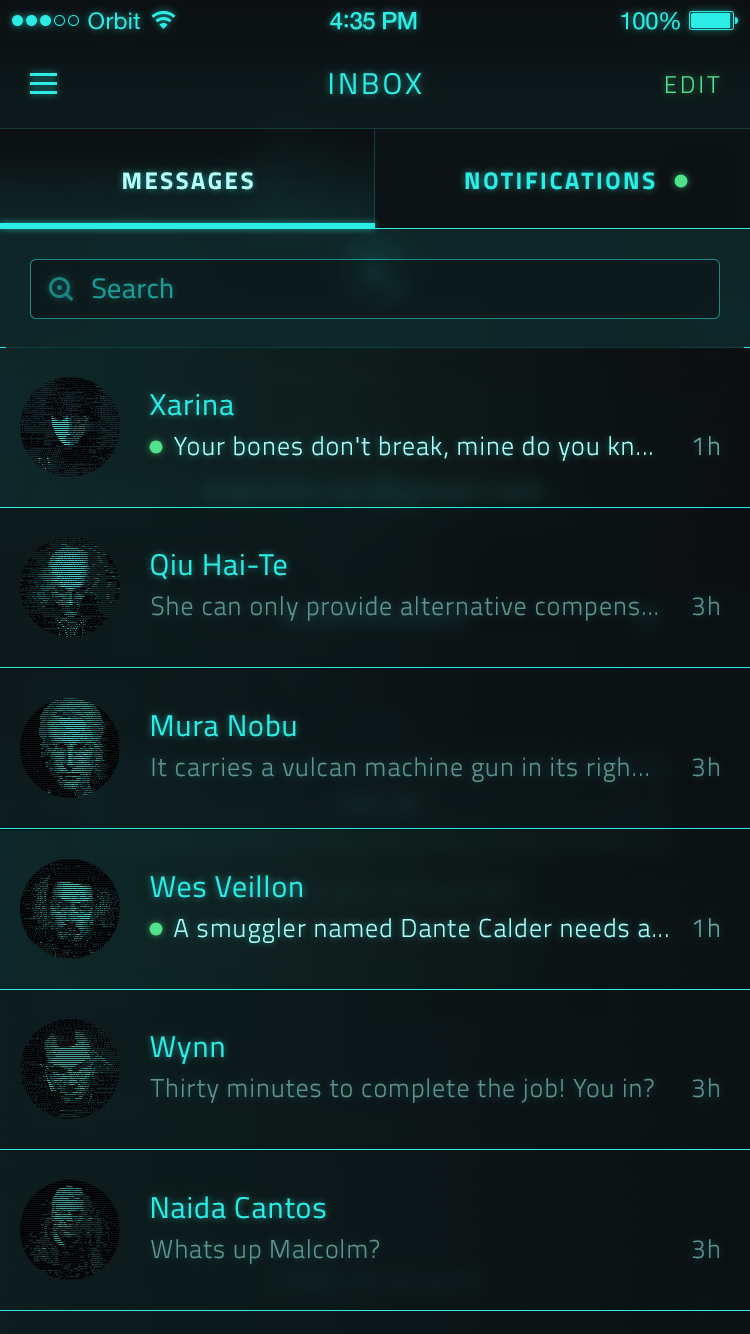
<style>
.page{position:relative;width:750px;height:1334px}
.page>*{position:absolute;margin:0}
.t1{font:23px "HelveticaNeue";letter-spacing:0.02em;color:#2bede6}
.t2{font:24px "HelveticaNeue-Medium";letter-spacing:-0.02em;color:#2bede6}
.t3{font:26px "Avenir-Medium";letter-spacing:-0.02em;color:#2bede6}
.t4{font:24px "HelveticaNeue";letter-spacing:-0.02em;color:#2bede6}
.t5{font:30px "Titillium-Regular";letter-spacing:0.1em;color:#2bede6;text-transform:uppercase}
.t6{font:24px "Titillium-Light";letter-spacing:0.12em;color:#4fe38b;text-transform:uppercase}
.t7{font:24px "Titillium-Bold";letter-spacing:0.1em;color:#b5fffc;text-transform:uppercase}
.t8{font:24px "Titillium-Bold";letter-spacing:0.1em;color:#2bede6;text-transform:uppercase}
.t9{font:28px "Titillium-Regular";letter-spacing:0.02em;color:#1d9c98}
.t10{font:30px "Titillium-Regular";letter-spacing:0.03em;color:#2bede6}
.t11{font:26px "Titillium-Light";letter-spacing:0.04em;color:#aafffc}
.t12{font:26px "Titillium-Light";letter-spacing:0.04em;color:#6ea6a4}
.t13{font:26px "Titillium-Light";letter-spacing:0.04em;color:#5f9291}
.t14{font:26px "Titillium-Light";letter-spacing:0.04em;color:#5f908f}
.t15{font:26px "Titillium-Light";letter-spacing:0.04em;color:#6ea7a5}
.t16{font:26px "Titillium-Light";letter-spacing:0.04em;color:#5f9290}
.t17{font:26px "Titillium-Light";letter-spacing:0.04em;color:#5f918f}
</style>
<div class="page">
<p class="t1" style="left:88px;top:12px;width:52px;height:18px">Orbit</p>
<p class="t2" style="left:330px;top:12px;width:87px;height:18px">4<span class="t3">:</span>35 PM</p>
<p class="t4" style="left:621px;top:12px;width:59px;height:18px">100%</p>
<p class="t5" style="left:330px;top:73px;width:92px;height:22px">Inbox</p>
<p class="t6" style="left:666px;top:76px;width:54px;height:17px">Edit</p>
<p class="t7" style="left:123px;top:172px;width:130px;height:18px">MESSAGES</p>
<p class="t8" style="left:465px;top:172px;width:190px;height:18px">NOTIFICATIONS</p>
<p class="t9" style="left:92px;top:278px;width:81px;height:21px">Search</p>
<p class="t10" style="left:150px;top:394px;width:84px;height:22px">Xarina</p>
<p class="t11" style="left:174px;top:436px;width:478px;height:25px">Your bones don't break, mine do you kn...</p>
<p class="t12" style="left:694px;top:436px;width:25px;height:19px">1h</p>
<p class="t10" style="left:151px;top:554px;width:136px;height:26px">Qiu Hai-Te</p>
<p class="t13" style="left:152px;top:596px;width:505px;height:25px">She can only provide alternative compens...</p>
<p class="t14" style="left:692px;top:596px;width:27px;height:20px">3h</p>
<p class="t10" style="left:152px;top:714px;width:144px;height:23px">Mura Nobu</p>
<p class="t13" style="left:152px;top:757px;width:496px;height:25px">It carries a vulcan machine gun in its righ...</p>
<p class="t14" style="left:692px;top:757px;width:27px;height:20px">3h</p>
<p class="t10" style="left:150px;top:875px;width:152px;height:23px">Wes Veillon</p>
<p class="t11" style="left:174px;top:918px;width:494px;height:25px">A smuggler named Dante Calder needs a...</p>
<p class="t15" style="left:694px;top:918px;width:25px;height:19px">1h</p>
<p class="t10" style="left:150px;top:1036px;width:74px;height:28px">Wynn</p>
<p class="t16" style="left:150px;top:1078px;width:504px;height:25px">Thirty minutes to complete the job! You in?</p>
<p class="t17" style="left:692px;top:1078px;width:27px;height:20px">3h</p>
<p class="t10" style="left:152px;top:1196px;width:174px;height:23px">Naida Cantos</p>
<p class="t13" style="left:151px;top:1239px;width:228px;height:25px">Whats up Malcolm?</p>
<p class="t17" style="left:692px;top:1239px;width:27px;height:20px">3h</p>
</div>
